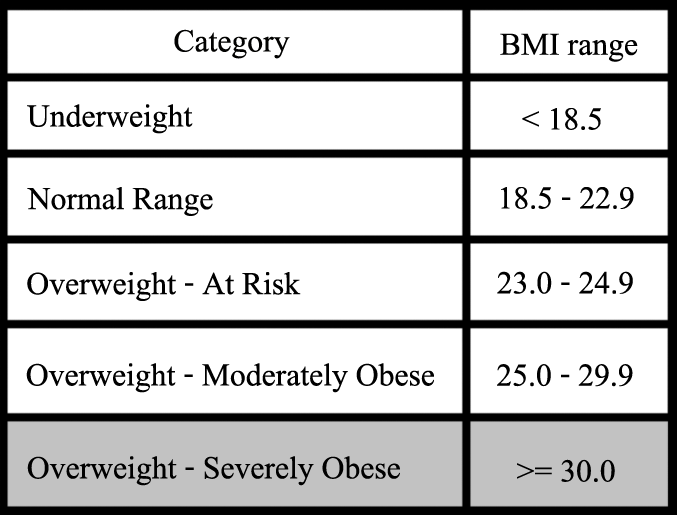
<style>
.page{position:relative;width:677px;height:515px;background:#ffffff}
.page>*{position:absolute;margin:0}
.t1{font:48px "AngsanaNew";color:#010100}
.t2{font:48px "AngsanaNew";color:#000000}
</style>
<div class="page">
<p class="t1" style="left:174px;top:29px;width:116px;height:30px">Category</p>
<p class="t2" style="left:500px;top:33px;width:138px;height:29px">BMI range</p>
<p class="t2" style="left:27px;top:104px;width:166px;height:30px">Underweight</p>
<p class="t2" style="left:522px;top:108px;width:79px;height:22px">&lt; 18.5</p>
<p class="t2" style="left:27px;top:187px;width:186px;height:29px">Normal Range</p>
<p class="t2" style="left:501px;top:187px;width:133px;height:22px">18.5 - 22.9</p>
<p class="t2" style="left:27px;top:272px;width:274px;height:29px">Overweight - At Risk</p>
<p class="t2" style="left:497px;top:271px;width:136px;height:23px">23.0 - 24.9</p>
<p class="t2" style="left:26px;top:363px;width:408px;height:30px">Overweight - Moderately Obese</p>
<p class="t2" style="left:497px;top:364px;width:136px;height:23px">25.0 - 29.9</p>
<p class="t2" style="left:27px;top:456px;width:373px;height:30px">Overweight - Severely Obese</p>
<p class="t2" style="left:517px;top:459px;width:98px;height:23px">&gt;= 30.0</p>
</div>
